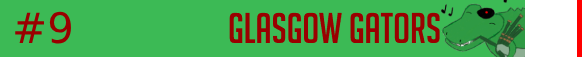
<style>
.page{position:relative;width:582px;height:57px;background:#3cba55}
.page>*{position:absolute;margin:0}
.t1{font:42px "BigNoodleTitling";color:#9a0000}
</style>
<div class="page">
<p class="t1" style="left:15px;top:11px;width:56px;height:33px">#9</p>
<p class="t1" style="left:229px;top:12px;width:211px;height:31px">Glasgow Gators</p>
</div>
